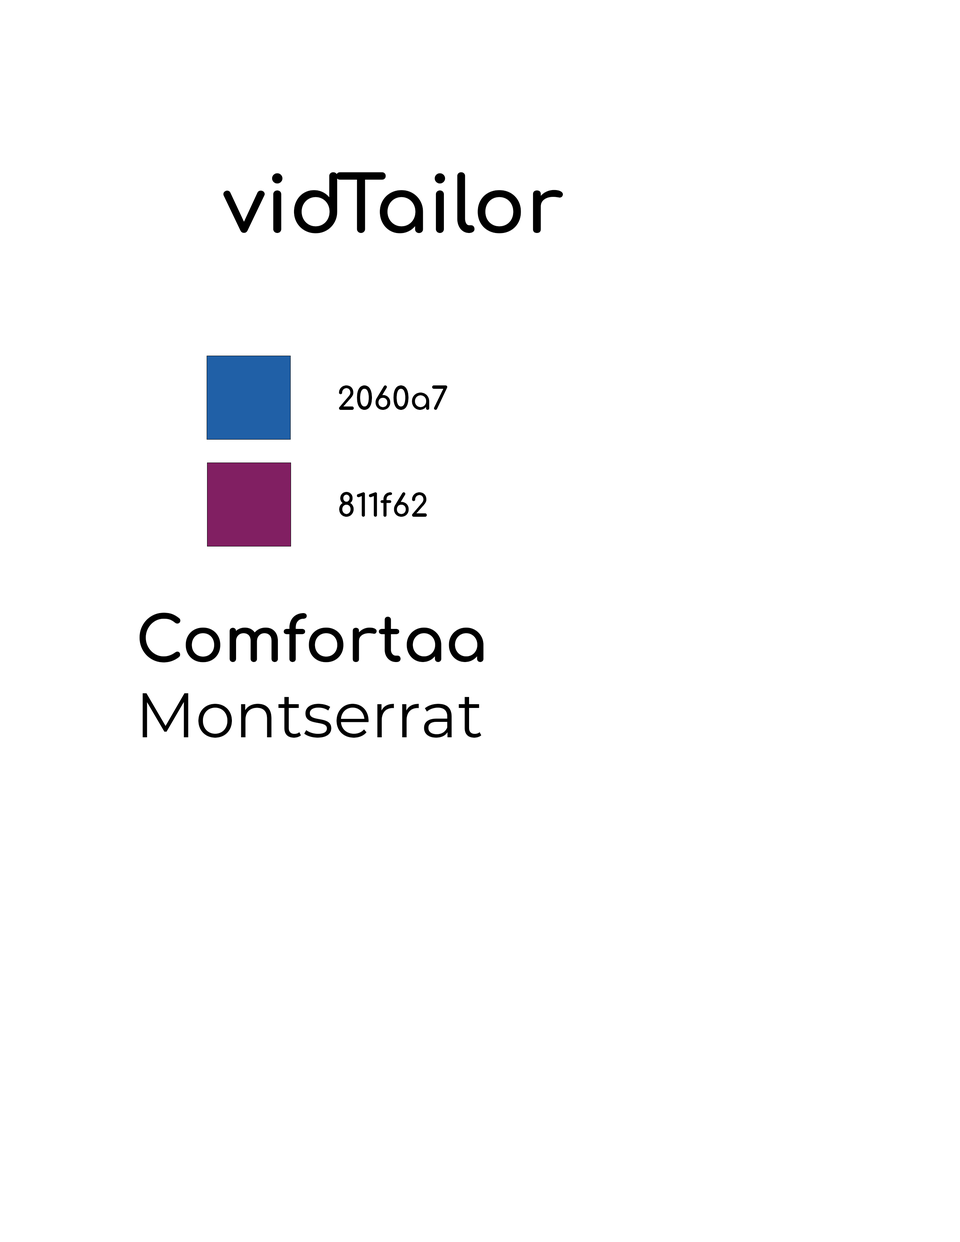
<style>
.page{position:relative;width:960px;height:1242px;background:#ffffff}
.page>*{position:absolute;margin:0}
.t1{font:77.8px "Comfortaa-Bold";color:#000000}
.t2{font:31.4px "Comfortaa-Bold";color:#000000}
.t3{font:62.7px "Montserrat-Regular";color:#000000}
.t4{font:62.7px "Comfortaa-Bold";color:#000000}
</style>
<div class="page">
<p class="t1" style="left:223px;top:172px;width:340px;height:61px">vidTailor</p>
<p class="t2" style="left:339px;top:385px;width:109px;height:25px">2060a7</p>
<p class="t2" style="left:339px;top:492px;width:88px;height:25px">811f62</p>
<p class="t3" style="left:139px;top:613px;width:345px;height:125px"><span class="t4">Comfortaa<br></span>Montserrat</p>
</div>
